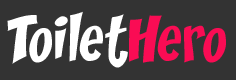
<style>
.page{position:relative;width:236px;height:80px;background:#333333}
.page>*{position:absolute;margin:0}
.t1{font:58px "Yikes";color:#ffffff}
.t2{font:58px "Yikes";color:#fa0c54}
</style>
<div class="page">
<p class="t1" style="left:7px;top:11px;width:219px;height:57px">Toilet<span class="t2">Hero</span></p>
</div>
